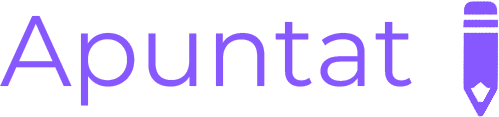
<style>
.page{position:relative;width:499px;height:117px;background:#ffffff}
.page>*{position:absolute;margin:0}
.t1{font:100px "MontserratRoman-Regular";color:#8758ff}
</style>
<div class="page">
<p class="t1" style="left:0px;top:15px;width:412px;height:91px">Apuntat</p>
</div>
